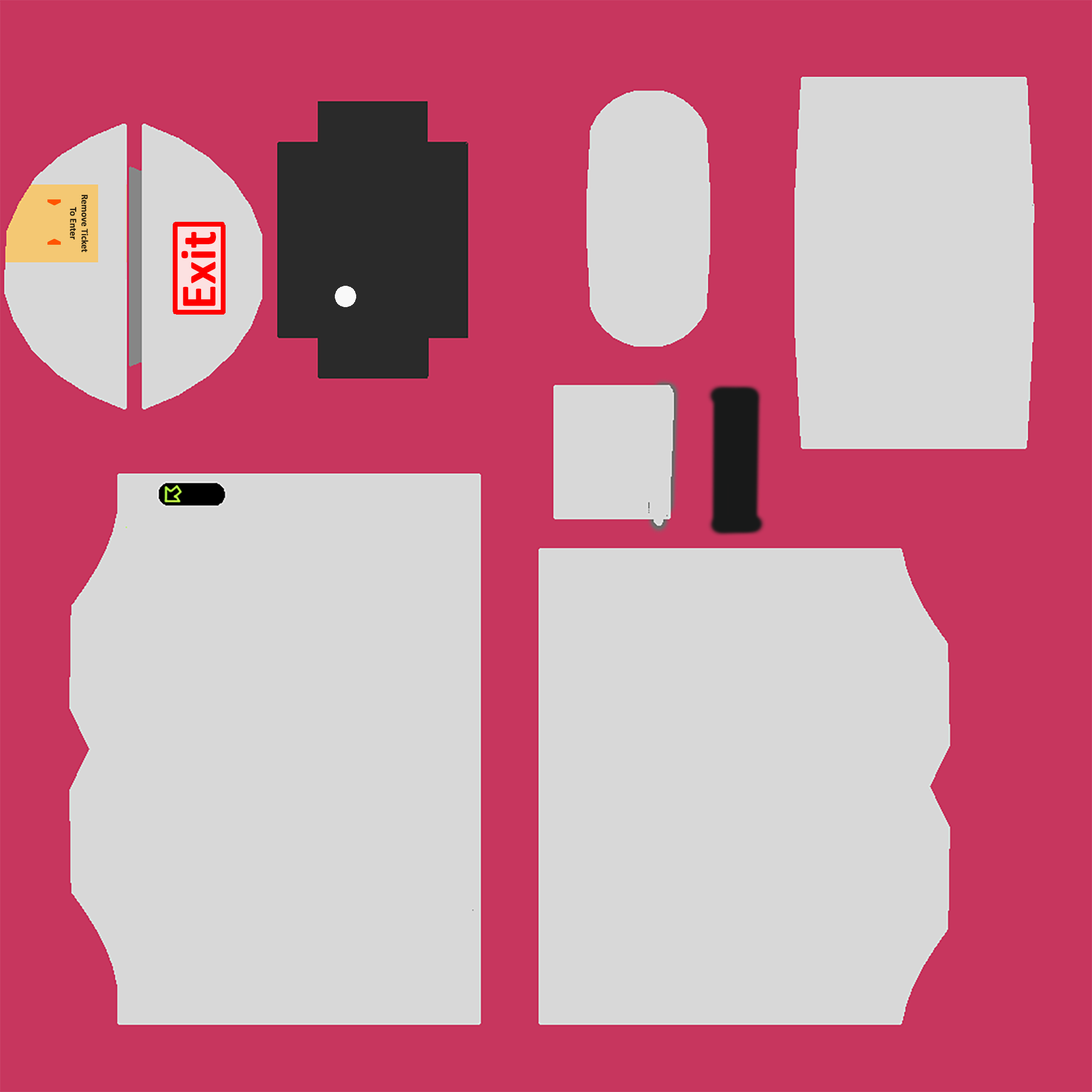
<style>
.page{position:relative;width:1092px;height:1092px;background:#d8d8d8}
.page>*{position:absolute;margin:0}
.t1{font:9.6px "Calibri-Bold";color:#28200f}
.t2{font:51.2px "Calibri-Bold";color:#ff0000}
</style>
<div class="page">
<p class="t1" style="left:70px;top:195px;width:19px;height:57px;rotate:90deg">Remove Ticket To Enter</p>
<p class="t2" style="left:181px;top:232px;width:35px;height:74px;rotate:-90deg">Exit</p>
</div>
